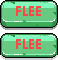
<style>
.page{position:relative;width:58px;height:60px;background:#69c982}
.page>*{position:absolute;margin:0}
.t1{font:14px "CenturyGothic-Bold";color:#ff4747}
</style>
<div class="page">
<p class="t1" style="left:16px;top:6px;width:25px;height:10px">FLEE</p>
<p class="t1" style="left:16px;top:39px;width:25px;height:10px">FLEE</p>
</div>
